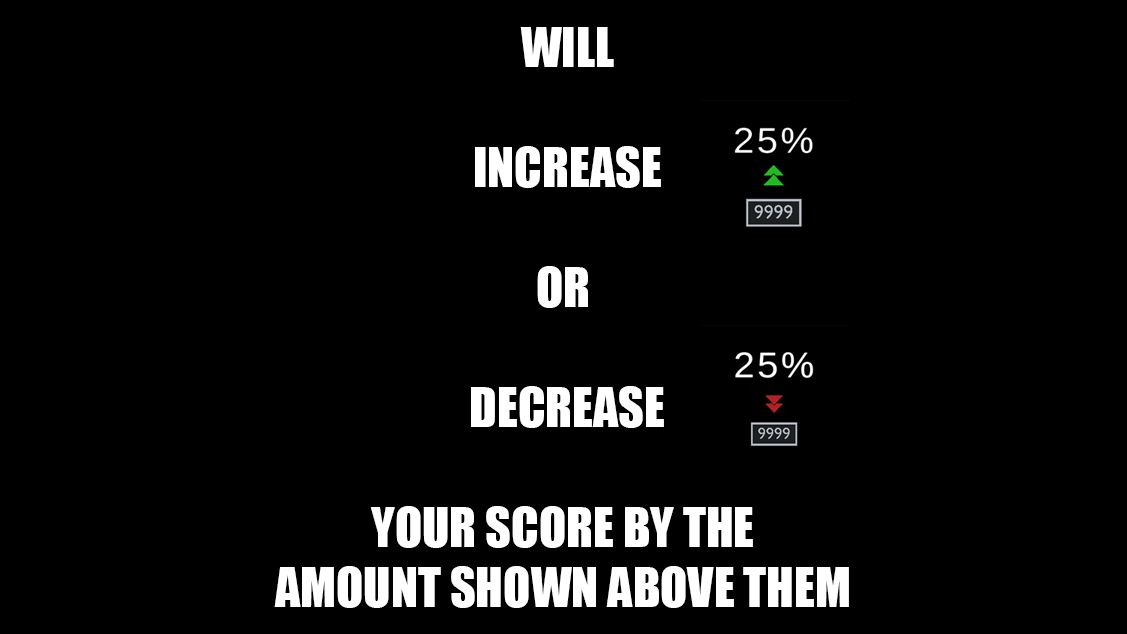
<style>
.page{position:relative;width:1127px;height:634px;background:#000000}
.page>*{position:absolute;margin:0}
.t1{font:50px "Impact";color:#ffffff;text-transform:uppercase}
</style>
<div class="page">
<p class="t1" style="left:274px;top:27px;width:575px;height:581px;text-align:center">will<br><br>increase<br><br>or <br><br>decrease<br><br>your score by the <br>amount shown above them</p>
</div>
